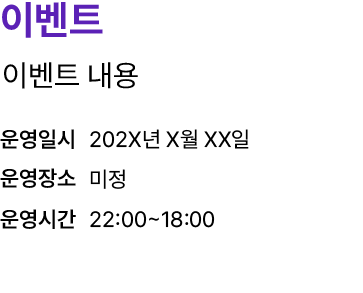
<style>
.page{position:relative;width:363px;height:293px;background:#ffffff}
.page>*{position:absolute;margin:0}
.t1{font:40px "Pretendard-Bold";color:#5b21b6}
.t2{font:30px "Pretendard-Regular";color:#000000}
.t3{font:22px "Pretendard-SemiBold";color:#000000}
.t4{font:22px "Pretendard-Regular";color:#000000}
</style>
<div class="page">
<p class="t1" style="left:2px;top:2px;width:101px;height:36px">이벤트</p>
<p class="t2" style="left:4px;top:62px;width:134px;height:27px">이벤트 내용</p>
<p class="t3" style="left:0px;top:129px;width:74px;height:20px">운영일시</p>
<p class="t4" style="left:90px;top:129px;width:159px;height:20px">202X년 X월 XX일</p>
<p class="t3" style="left:0px;top:168px;width:76px;height:20px">운영장소</p>
<p class="t4" style="left:90px;top:169px;width:35px;height:20px">미정</p>
<p class="t3" style="left:0px;top:209px;width:76px;height:20px">운영시간</p>
<p class="t4" style="left:90px;top:211px;width:125px;height:17px">22:00~18:00</p>
</div>
